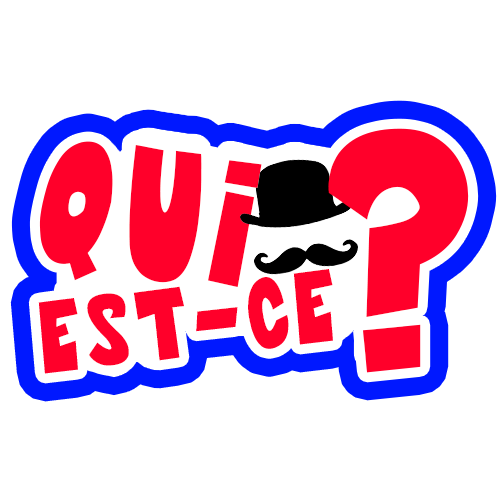
<style>
.page{position:relative;width:500px;height:500px;background:#ffffff}
.page>*{position:absolute;margin:0}
.t1{font:343.9px "TytoonMist";letter-spacing:0.05em;color:#ff002a;scale:0.83 1}
.t2{font:188.2px "TytoonMist";letter-spacing:0.05em;color:#ff002a;scale:0.83 1}
.t3{font:103.4px "TytoonMist";letter-spacing:0.05em;color:#ff002a;scale:0.83 1}
</style>
<div class="page">
<p class="t1" style="left:328px;top:128px;width:141px;height:245px">?</p>
<p class="t2" style="left:39px;top:141px;width:223px;height:146px;rotate:7deg">qui</p>
<p class="t3" style="left:38px;top:269px;width:295px;height:105px;rotate:-6deg">est-ce</p>
</div>
